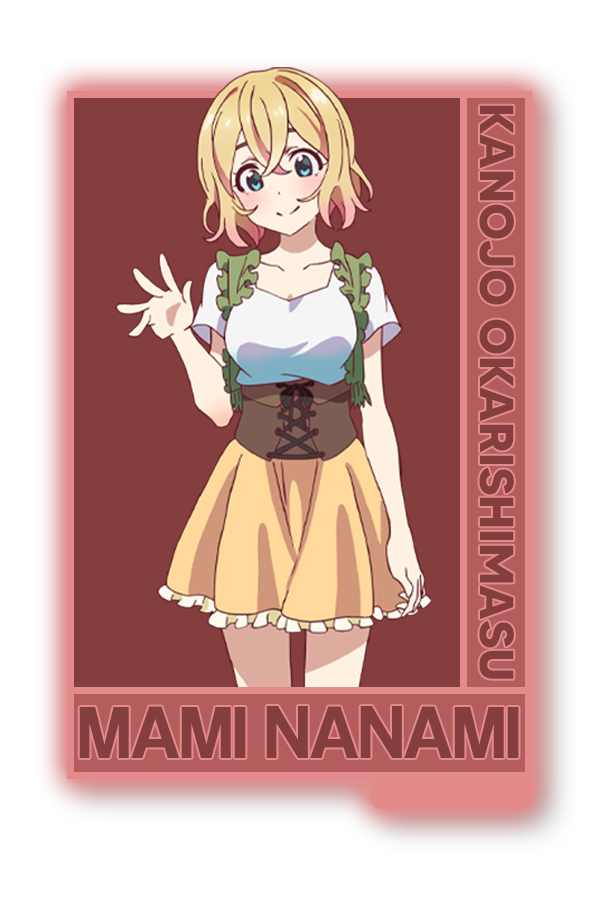
<style>
.page{position:relative;width:600px;height:900px;background:#843e3e}
.page>*{position:absolute;margin:0}
.t1{font:47.6px "MADETOMMY-Bold";color:#843e3e}
.t2{font:76.1px "CoolveticaRg-Regular";color:#843e3e}
</style>
<div class="page">
<p class="t1" style="left:479px;top:105px;width:35px;height:574px;rotate:90deg">KANOJO OKARISHIMASU</p>
<p class="t2" style="left:79px;top:706px;width:440px;height:52px">MAMI NANAMI</p>
</div>
